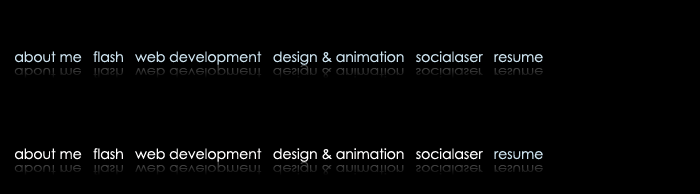
<style>
.page{position:relative;width:700px;height:194px;background:#000000}
.page>*{position:absolute;margin:0}
.t1{font:14.1px "CenturyGothic";letter-spacing:-0.005em;color:#cbe1ed}
.t2{font:14.1px "CenturyGothic";letter-spacing:-0.005em;color:#323232}
.t3{font:14.1px "CenturyGothic";letter-spacing:-0.005em;color:#fffefe}
</style>
<div class="page">
<p class="t1" style="left:15px;top:51px;width:528px;height:14px">about me   flash   web development   design &amp; animation   socialaser   resume</p>
<p class="t2" style="left:14px;top:65px;width:529px;height:13px">about me   flash   web development   design &amp; animation   socialaser   resume</p>
<p class="t3" style="left:15px;top:148px;width:528px;height:14px">about me   flash   web development   design &amp; animation   socialaser<span class="t1">   resume</span></p>
<p class="t2" style="left:14px;top:162px;width:529px;height:13px">about me   flash   web development   design &amp; animation   socialaser   resume</p>
</div>
